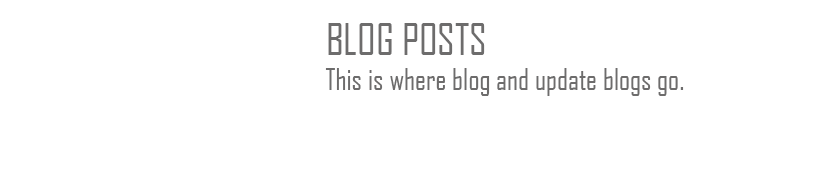
<style>
.page{position:relative;width:834px;height:195px;background:#ffffff}
.page>*{position:absolute;margin:0}
.t1{font:29.2px "AgencyFB-Reg";color:#6d6c6c}
.t2{font:41.7px "AgencyFB-Reg";color:#6d6c6c}
</style>
<div class="page">
<p class="t1" style="left:325px;top:23px;width:359px;height:73px"><span class="t2">BLOG POSTS<br></span>This is where blog and update blogs go.</p>
</div>
